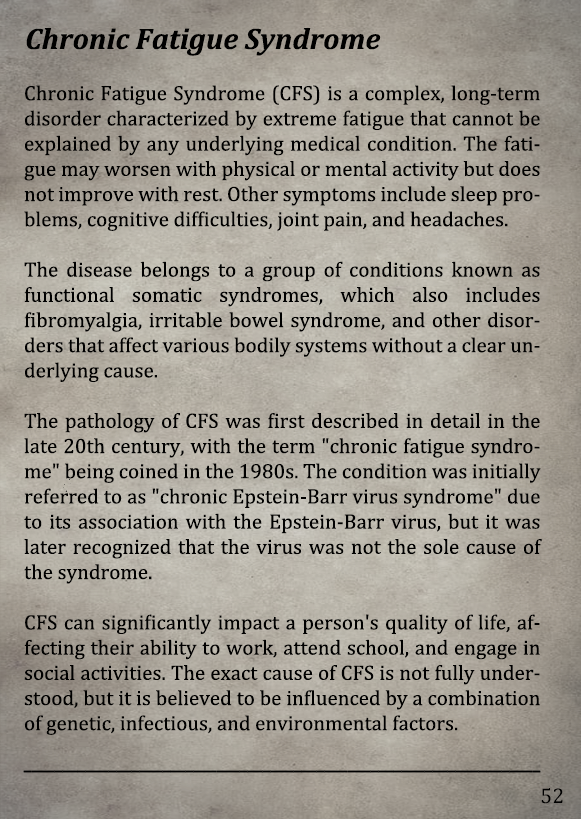
<style>
.page{position:relative;width:581px;height:819px}
.page>*{position:absolute;margin:0}
.t1{font:30px "Cambria-BoldItalic";color:#000000}
.t2{font:21px "Cambria";color:#000000}
.t3{font:21px "Arimo";color:#000000;scale:0.66 1}
.t4{font:21.5px "Cambria";color:#000000}
</style>
<div class="page">
<p class="t1" style="left:26px;top:28px;width:355px;height:28px">Chronic Fatigue Syndrome</p>
<p class="t2" style="left:24px;top:85px;width:518px;height:650px;text-align:justify">Chronic Fatigue Syndrome (CFS) is a complex, long-term disorder characterized by extreme fatigue that cannot be explained by any underlying medical condition. The fatigue may worsen with physical or mental activity but does not improve with rest. Other symptoms include sleep problems, cognitive difficulties, joint pain, and headaches.<br><br>The disease belongs to a group of conditions known as functional somatic syndromes, which also includes fibromyalgia, irritable bowel syndrome, and other disorders that affect various bodily systems without a clear underlying cause.<br><br>The pathology of CFS was first described in detail in the late 20th century, with the term "chronic fatigue syndrome" being coined in the 1980s. The condition was initially referred to as "chronic Epstein-Barr virus syndrome" due to its association with the Epstein-Barr virus, but it was later recognized that the virus was not the sole cause of the syndrome.<br><br>CFS can significantly impact a person's quality of life, affecting their ability to work, attend school, and engage in social activities. The exact cause of CFS is not fully understood, but it is believed to be influenced by a combination of genetic, infectious, and environmental factors.</p>
<p class="t3" style="left:23px;top:770px;width:518px;height:3px">___________________________________________________________________</p>
<p class="t4" style="left:541px;top:788px;width:22px;height:16px">52</p>
</div>
